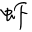
<style>
.page{position:relative;width:32px;height:32px;background:#ffffff}
.page>*{position:absolute;margin:0}
.t1{font:35.6px "MLingWaiMedium-TC";color:#000000;scale:1.05 1}
</style>
<div class="page">
<p class="t1" style="left:0px;top:2px;width:28px;height:28px">虾</p>
</div>
